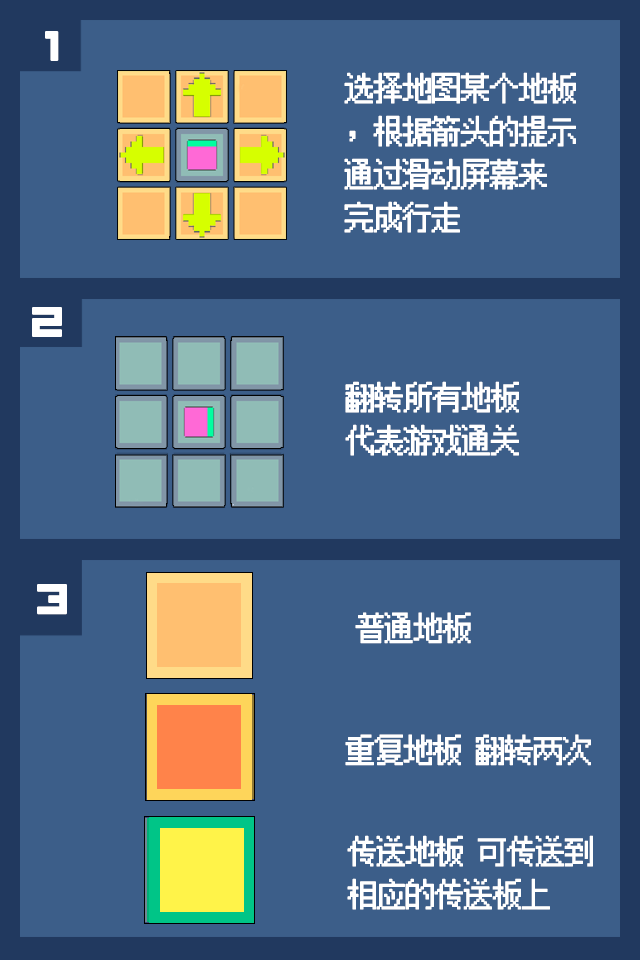
<style>
.page{position:relative;width:640px;height:960px;background:#3c5e89}
.page>*{position:absolute;margin:0}
.t1{font:72px "VisitorTT2BRK";letter-spacing:-0.06em;color:#ffffff;font-weight:bold}
.t2{font:30px/43px "FZXS12--GB1-0";letter-spacing:-0.06em;color:#ffffff;font-weight:bold}
.t3{font:30px "FZXS12--GB1-0";letter-spacing:-0.06em;color:#ffffff;font-weight:bold}
</style>
<div class="page">
<p class="t1" style="left:45px;top:31px;width:14px;height:30px">1</p>
<p class="t2" style="left:344px;top:72px;width:232px;height:161px">选择地图某个地板<br>，根据箭头的提示<br>通过滑动屏幕来<br>完成行走</p>
<p class="t1" style="left:32px;top:307px;width:30px;height:30px">2</p>
<p class="t2" style="left:345px;top:381px;width:174px;height:75px">翻转所有地板<br>代表游戏通关</p>
<p class="t1" style="left:37px;top:584px;width:30px;height:31px">3</p>
<p class="t3" style="left:355px;top:612px;width:116px;height:32px">普通地板</p>
<p class="t3" style="left:345px;top:734px;width:246px;height:32px">重复地板 翻转两次</p>
<p class="t2" style="left:347px;top:835px;width:246px;height:75px">传送地板 可传送到<br>相应的传送板上</p>
</div>
